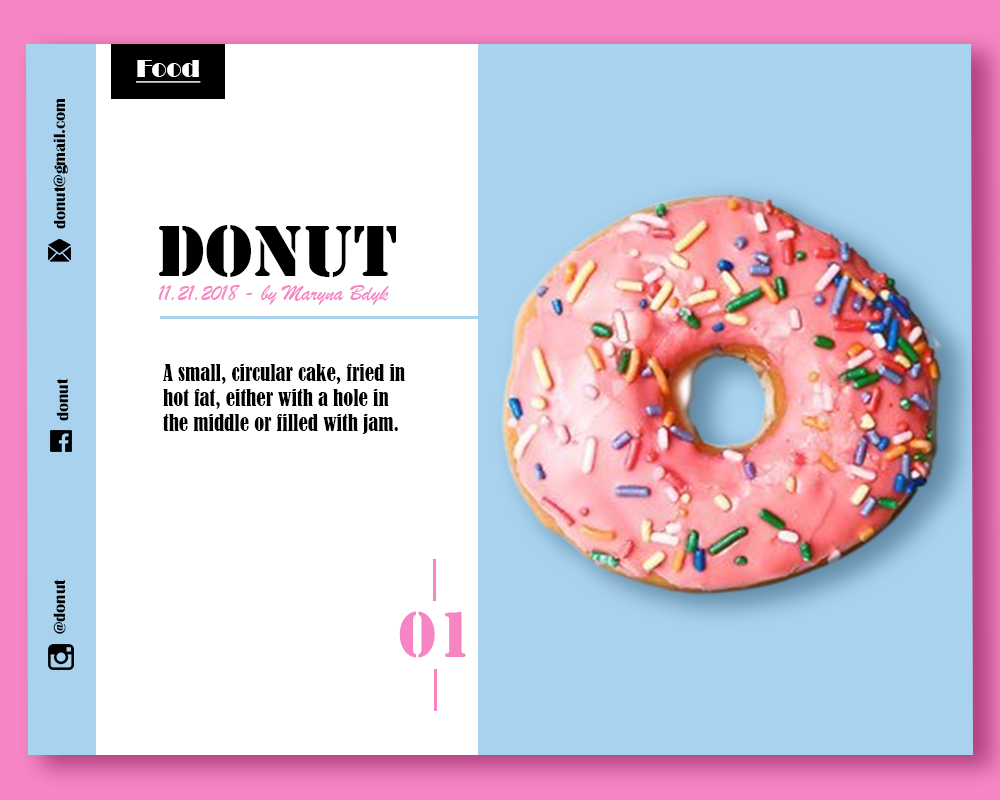
<style>
.page{position:relative;width:1000px;height:800px;background:#ffffff}
.page>*{position:absolute;margin:0}
.t1{font:25px "Broadway";color:#ffffff;text-decoration:underline}
.t2{font:16.7px "BritannicBold";color:#000000}
.t3{font:75px "Stencil";color:#000000}
.t4{font:22.5px "BrushScriptMT";color:#f685c3}
.t5{font:20.8px "BernardMT-Condensed";color:#000000}
.t6{font:66.7px "Stencil";color:#f685c3}
</style>
<div class="page">
<p class="t1" style="left:136px;top:60px;width:65px;height:23px">Food</p>
<p class="t2" style="left:53px;top:99px;width:15px;height:130px;rotate:-90deg">donut@gmail.com</p>
<p class="t3" style="left:159px;top:225px;width:237px;height:52px">DONUT</p>
<p class="t4" style="left:158px;top:285px;width:231px;height:20px">11.21.2018 - by Maryna Bdyk</p>
<p class="t5" style="left:163px;top:364px;width:242px;height:70px">A small, circular cake, fried in<br>hot fat, either with a hole in<br>the middle or filled with jam.</p>
<p class="t2" style="left:56px;top:378px;width:13px;height:43px;rotate:-91deg">donut</p>
<p class="t2" style="left:53px;top:579px;width:13px;height:55px;rotate:-90deg">@donut</p>
<p class="t6" style="left:399px;top:611px;width:67px;height:47px">01</p>
</div>
